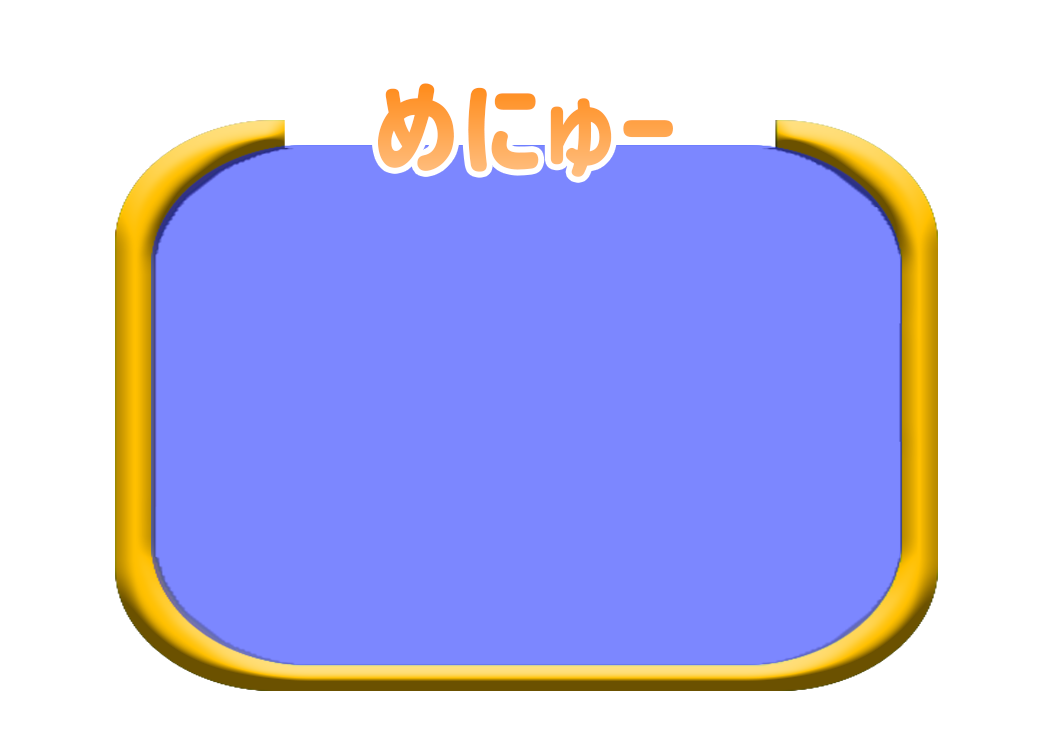
<style>
.page{position:relative;width:1052px;height:752px;background:#7c87ff}
.page>*{position:absolute;margin:0}
.t1{font:109.9px "Corporate-Logo-Rounded"}
</style>
<div class="page">
<p class="t1" style="left:378px;top:83px;width:295px;height:94px">めにゅー</p>
</div>
